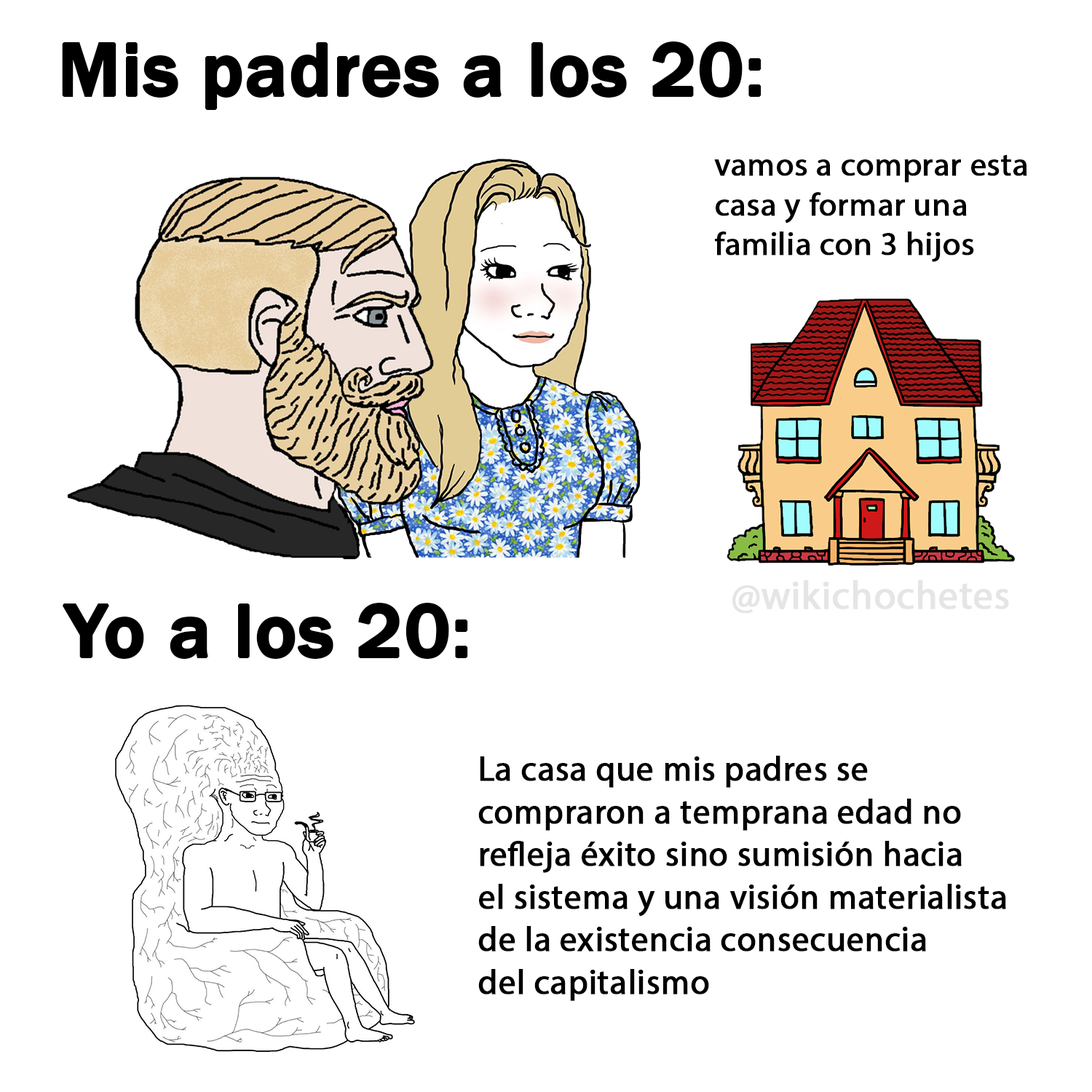
<style>
.page{position:relative;width:1092px;height:1092px;background:#ffffff}
.page>*{position:absolute;margin:0}
.t1{font:77.4px "FranklinGothic-Medium";color:#000000;font-weight:bold}
.t2{font:32.7px "MyriadPro-Regular";color:#000000;font-weight:bold}
.t3{font:39.5px "MyriadPro-Regular";color:#e5e5e5;font-weight:bold}
.t4{font:34.6px "MyriadPro-Regular";color:#000000;font-weight:bold}
</style>
<div class="page">
<p class="t1" style="left:62px;top:41px;width:699px;height:70px">Mis padres a los 20:</p>
<p class="t2" style="left:714px;top:154px;width:313px;height:108px">vamos a comprar esta<br>casa y formar una<br>familia con 3 hijos</p>
<p class="t3" style="left:732px;top:580px;width:277px;height:34px">@wikichochetes</p>
<p class="t1" style="left:62px;top:602px;width:406px;height:58px">Yo a los 20:</p>
<p class="t4" style="left:478px;top:756px;width:528px;height:245px">La casa que mis padres se<br>compraron a temprana edad no<br>refleja éxito sino sumisión hacia<br>el sistema y una visión materialista<br>de la existencia consecuencia<br>del capitalismo</p>
</div>
